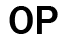
<style>
.page{position:relative;width:66px;height:41px;background:#ffffff}
.page>*{position:absolute;margin:0}
.t1{font:41.3px "FranklinGothic-Medium";color:#000000}
</style>
<div class="page">
<p class="t1" style="left:9px;top:6px;width:49px;height:28px">OP</p>
</div>
